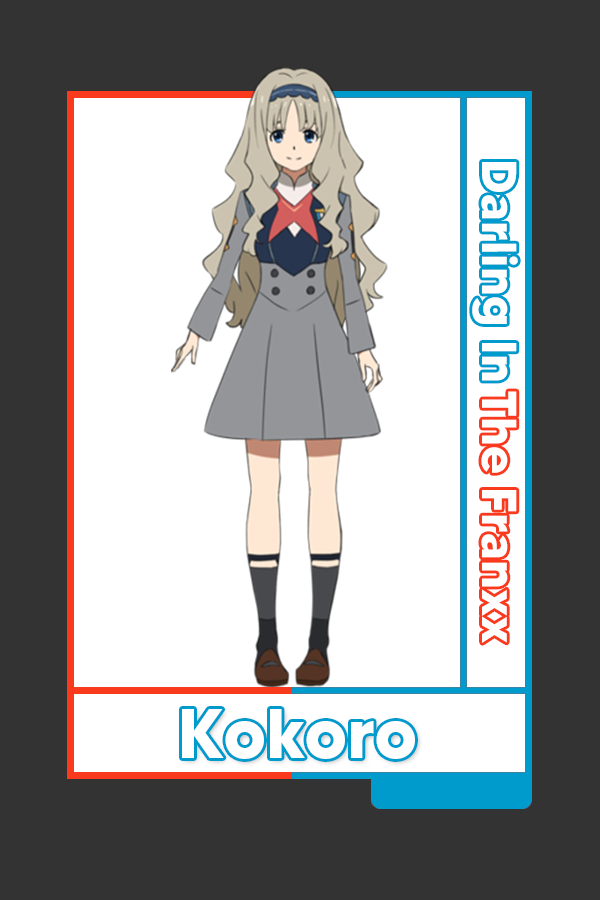
<style>
.page{position:relative;width:600px;height:900px;background:#ffffff}
.page>*{position:absolute;margin:0}
.t1{font:48.8px "MADETOMMY-Bold";color:#ffffff}
.t2{font:70.1px "MADETOMMY-Bold";color:#ffffff}
</style>
<div class="page">
<p class="t1" style="left:472px;top:162px;width:46px;height:219px;rotate:90deg">Darling In</p>
<p class="t1" style="left:481px;top:391px;width:36px;height:252px;rotate:90deg">The Franxx</p>
<p class="t2" style="left:182px;top:709px;width:233px;height:50px">Kokoro</p>
</div>
